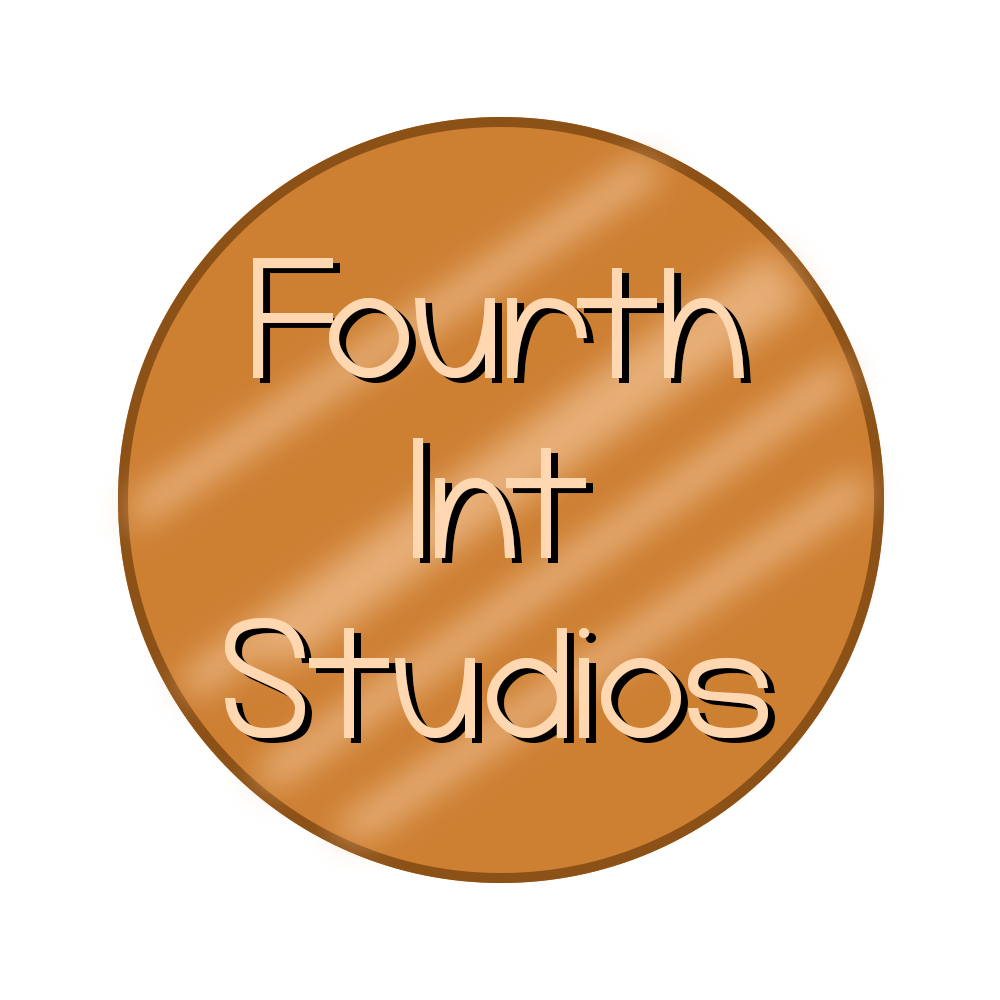
<style>
.page{position:relative;width:1000px;height:1000px;background:#ffffff}
.page>*{position:absolute;margin:0}
.t1{font:150px "PineLintGerm";color:#ffd7b0}
.t2{font:150px "PineLintGerm"}
</style>
<div class="page">
<p class="t1" style="left:225px;top:258px;width:543px;height:480px;text-align:center">Fourth Int Studios</p>
<p class="t2" style="left:232px;top:263px;width:543px;height:480px;text-align:center">Fourth Int Studios</p>
</div>
